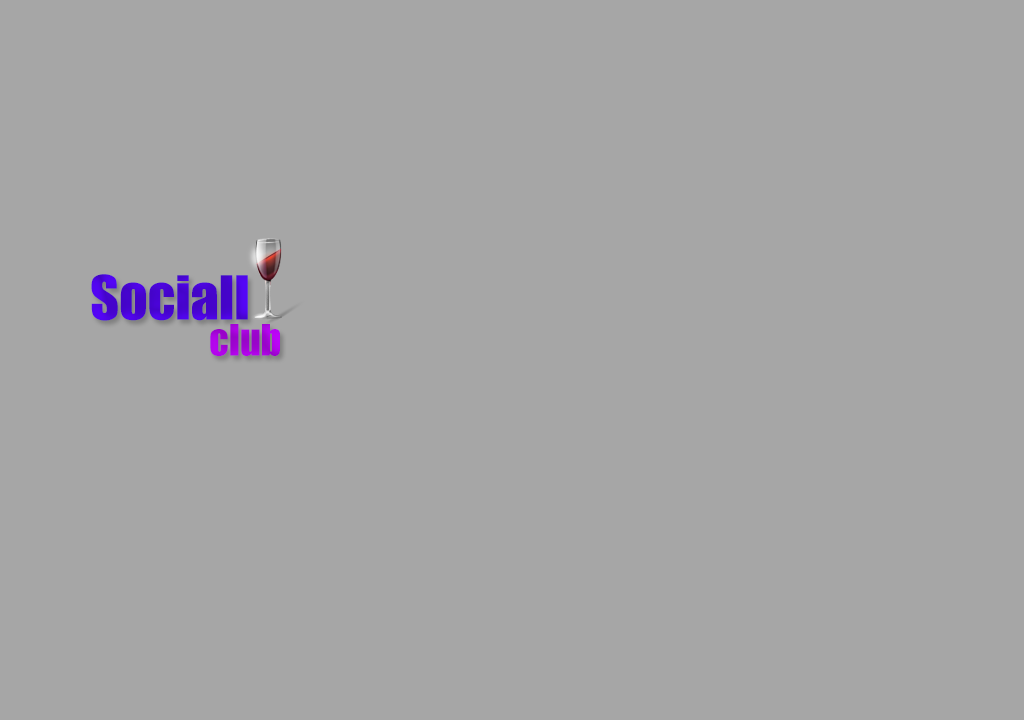
<style>
.page{position:relative;width:1024px;height:720px;background:#a6a6a6}
.page>*{position:absolute;margin:0}
.t1{font:56px "Impact";color:#4704d1}
.t2{font:40px "Impact";color:#a504da}
</style>
<div class="page">
<p class="t1" style="left:91px;top:274px;width:157px;height:47px">Sociall</p>
<p class="t2" style="left:210px;top:324px;width:70px;height:32px">club</p>
</div>
